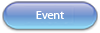
<style>
.page{position:relative;width:100px;height:33px}
.page>*{position:absolute;margin:0}
.t1{font:11.9px "MyriadPro-Regular";color:#ffffff}
</style>
<div class="page">
<p class="t1" style="left:36px;top:11px;width:28px;height:8px">Event</p>
</div>
